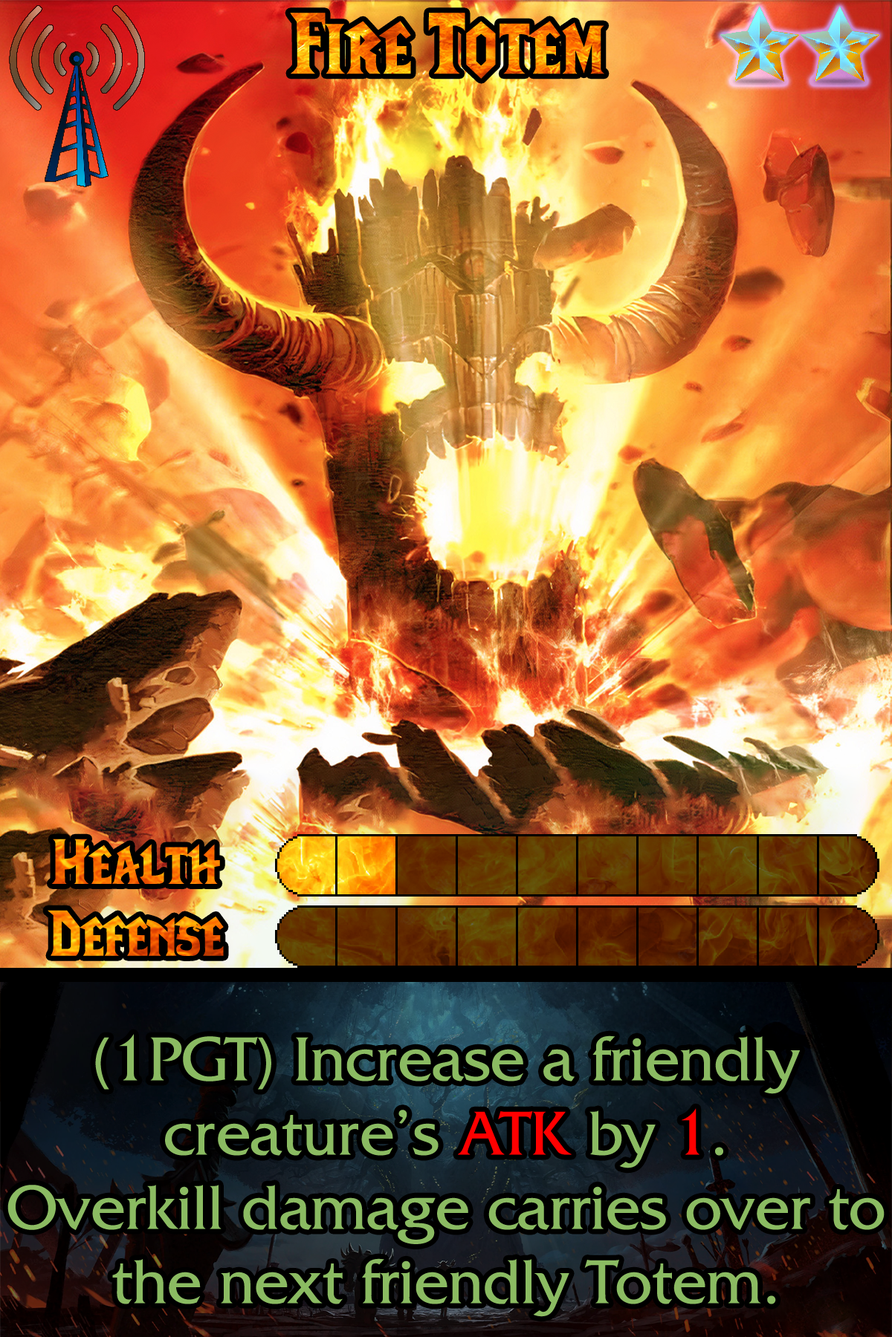
<style>
.page{position:relative;width:892px;height:1337px}
.page>*{position:absolute;margin:0}
.t1{font:148.6px "LifeCraft"}
.t2{font:109.2px "LifeCraft"}
.t3{font:110.7px "LifeCraft"}
.t4{font:111.5px/74.3px "FrizQuadrataStd";color:#8bbb62}
.t5{font:111.5px/74.3px "FrizQuadrataStd";color:#ff0000}
</style>
<div class="page">
<p class="t1" style="left:290px;top:13px;width:314px;height:66px">Fire Totem</p>
<p class="t2" style="left:51px;top:839px;width:169px;height:45px">Health</p>
<p class="t3" style="left:48px;top:910px;width:176px;height:46px">Defense</p>
<p class="t4" style="left:7px;top:1034px;width:877px;height:283px;text-align:center">(1PGT) Increase a friendly creature’s <span class="t5">ATK</span> by <span class="t5">1</span>.<br>Overkill damage carries over to the next friendly Totem.</p>
</div>
